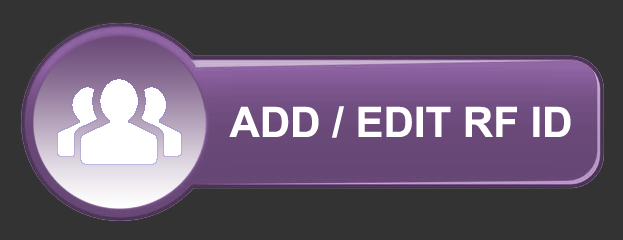
<style>
.page{position:relative;width:623px;height:240px;background:#333333}
.page>*{position:absolute;margin:0}
.t1{font:42px "Arial-BoldMT";color:#ffffff}
</style>
<div class="page">
<p class="t1" style="left:229px;top:106px;width:342px;height:32px">ADD / EDIT RF ID</p>
</div>
